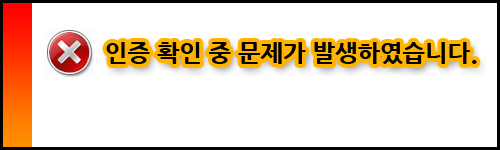
<style>
.page{position:relative;width:500px;height:150px;background:#ffffff}
.page>*{position:absolute;margin:0}
.t1{font:24px "NanumGothicExtraBold";color:#000000}
</style>
<div class="page">
<p class="t1" style="left:106px;top:42px;width:371px;height:22px">인증 확인 중 문제가 발생하였습니다.</p>
</div>
